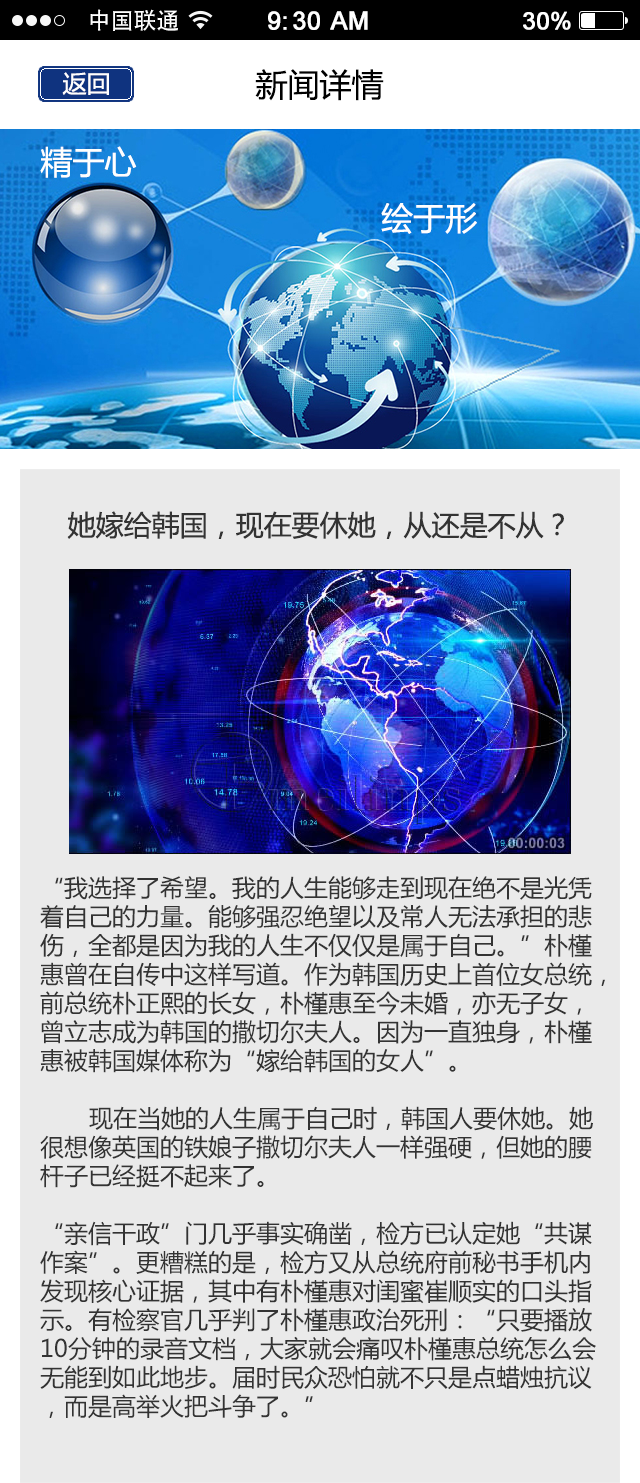
<style>
.page{position:relative;width:640px;height:1483px;background:#eaeaea}
.page>*{position:absolute;margin:0}
.t1{font:23px "AdobeHeitiStd-Regular";color:#ffffff}
.t2{font:25px "ArialMT";color:#ffffff;font-weight:bold}
.t3{font:24px "ArialMT";color:#ffffff;font-weight:bold}
.t4{font:24px "MicrosoftYaHei";color:#ffffff}
.t5{font:32px "MicrosoftYaHei";color:#000000}
.t6{font:28px "MicrosoftYaHei";color:#333333}
.t7{font:24px "MicrosoftYaHei";color:#333333}
</style>
<div class="page">
<p class="t1" style="left:90px;top:9px;width:88px;height:22px">中国联通</p>
<p class="t1" style="left:90px;top:9px;width:88px;height:22px">中国联通</p>
<p class="t2" style="left:268px;top:11px;width:100px;height:19px">9:30 AM</p>
<p class="t2" style="left:268px;top:11px;width:100px;height:19px">9:30 AM</p>
<p class="t3" style="left:523px;top:11px;width:48px;height:19px">30%</p>
<p class="t3" style="left:523px;top:11px;width:48px;height:19px">30%</p>
<p class="t4" style="left:62px;top:72px;width:47px;height:23px">返回</p>
<p class="t5" style="left:255px;top:69px;width:129px;height:32px">新闻详情</p>
<p class="t6" style="left:67px;top:511px;width:497px;height:28px">她嫁给韩国，现在要休她，从还是不从？</p>
<p class="t7" style="left:40px;top:876px;width:565px;height:543px">“我选择了希望。我的人生能够走到现在绝不是光凭<br>着自己的力量。能够强忍绝望以及常人无法承担的悲<br>伤，全都是因为我的人生不仅仅是属于自己。”朴槿<br>惠曾在自传中这样写道。作为韩国历史上首位女总统，<br>前总统朴正熙的长女，朴槿惠至今未婚，亦无子女，<br>曾立志成为韩国的撒切尔夫人。因为一直独身，朴槿<br>惠被韩国媒体称为“嫁给韩国的女人”。<br>       <br>       现在当她的人生属于自己时，韩国人要休她。她<br>很想像英国的铁娘子撒切尔夫人一样强硬，但她的腰<br>杆子已经挺不起来了。<br><br>“亲信干政”门几乎事实确凿，检方已认定她“共谋<br>作案”。更糟糕的是，检方又从总统府前秘书手机内<br>发现核心证据，其中有朴槿惠对闺蜜崔顺实的口头指<br>示。有检察官几乎判了朴槿惠政治死刑：“只要播放<br>10分钟的录音文档，大家就会痛叹朴槿惠总统怎么会<br>无能到如此地步。届时民众恐怕就不只是点蜡烛抗议<br>，而是高举火把斗争了。”</p>
</div>
